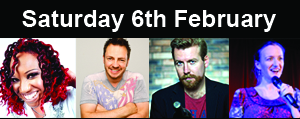
<style>
.page{position:relative;width:300px;height:119px;background:#060808}
.page>*{position:absolute;margin:0}
.t1{font:24px "Arial-BoldMT";color:#ffffff}
</style>
<div class="page">
<p class="t1" style="left:22px;top:10px;width:254px;height:22px">Saturday 6th February</p>
</div>
